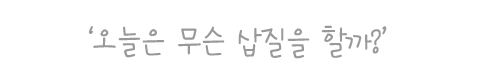
<style>
.page{position:relative;width:480px;height:80px;background:#ffffff}
.page>*{position:absolute;margin:0}
.t1{font:36px "CreChoM";letter-spacing:-0.075em;color:#999999}
</style>
<div class="page">
<p class="t1" style="left:89px;top:25px;width:298px;height:34px">‘오늘은 무슨 삽질을 할까?’</p>
</div>
